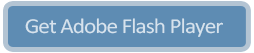
<style>
.page{position:relative;width:254px;height:53px;background:#5e8cb3}
.page>*{position:absolute;margin:0}
.t1{font:21.6px "Calibri";letter-spacing:-0.04em;color:#d7e2ec;scale:1.07 1}
</style>
<div class="page">
<p class="t1" style="left:25px;top:18px;width:198px;height:19px">Get Adobe Flash Player</p>
</div>
